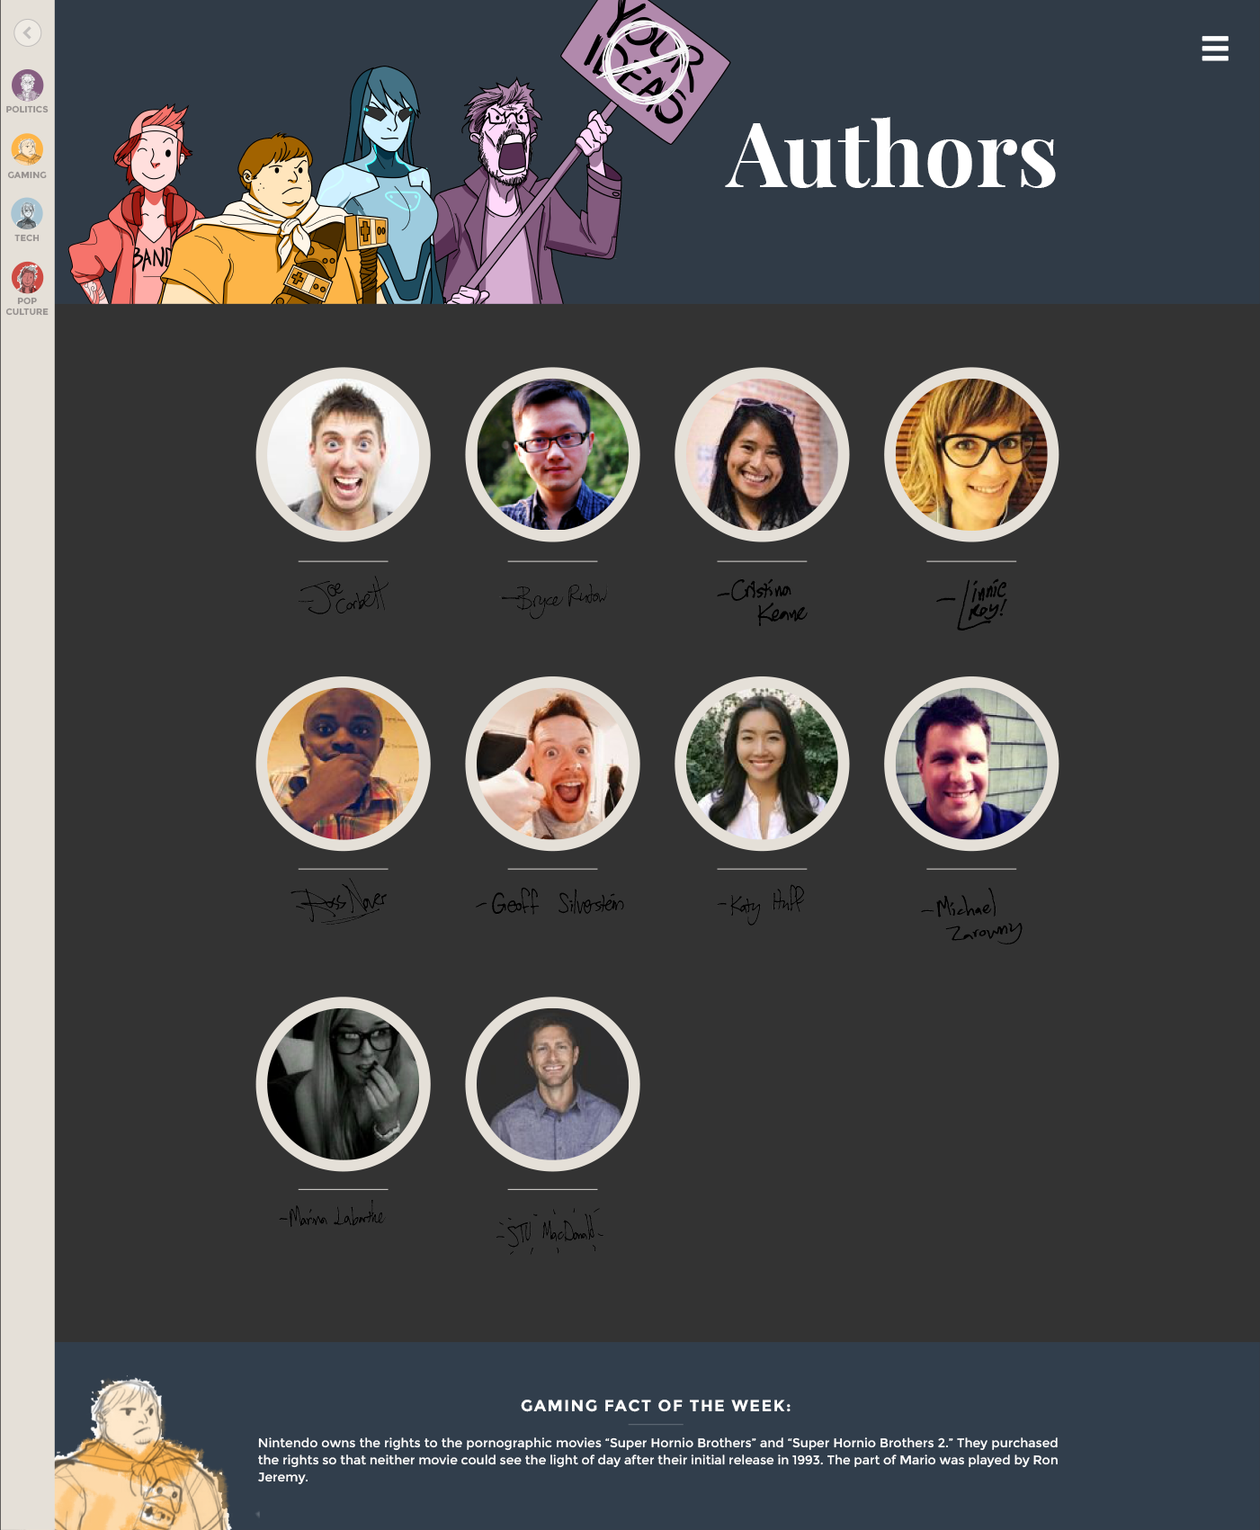
<style>
.page{position:relative;width:1260px;height:1530px;background:#333333}
.page>*{position:absolute;margin:0}
.t1{font:9px "Montserrat-Bold";color:#96918f}
.t2{font:89.9px "PlayfairDisplay-Bold";color:#ffffff}
.t3{font:16.2px "Montserrat-Bold";letter-spacing:0.08em;color:#ffffff;text-transform:uppercase}
.t4{font:12.6px/17.1px "Montserrat-Regular";color:#ffffff}
</style>
<div class="page">
<p class="t1" style="left:6px;top:105px;width:43px;height:8px">POLITICS</p>
<p class="t2" style="left:725px;top:117px;width:331px;height:71px">Authors</p>
<p class="t1" style="left:7px;top:171px;width:40px;height:8px">GAMING</p>
<p class="t1" style="left:14px;top:234px;width:26px;height:8px">TECH</p>
<p class="t1" style="left:5px;top:297px;width:44px;height:19px;text-align:center">POP<br>CULTURE</p>
<p class="t3" style="left:521px;top:1399px;width:269px;height:13px">Gaming Fact Of The Week:</p>
<p class="t4" style="left:258px;top:1437px;width:799px;height:48px;text-align:justify">Nintendo owns the rights to the pornographic movies “Super Hornio Brothers” and “Super Hornio Brothers 2.” They purchased the rights so that neither movie could see the light of day after their initial release in 1993. The part of Mario was played by Ron Jeremy.</p>
</div>
